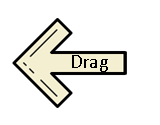
<style>
.page{position:relative;width:160px;height:125px;background:#ffffff}
.page>*{position:absolute;margin:0}
.t1{font:20px "Calibri";color:#000000}
</style>
<div class="page">
<p class="t1" style="left:72px;top:55px;width:36px;height:17px">Drag</p>
</div>
